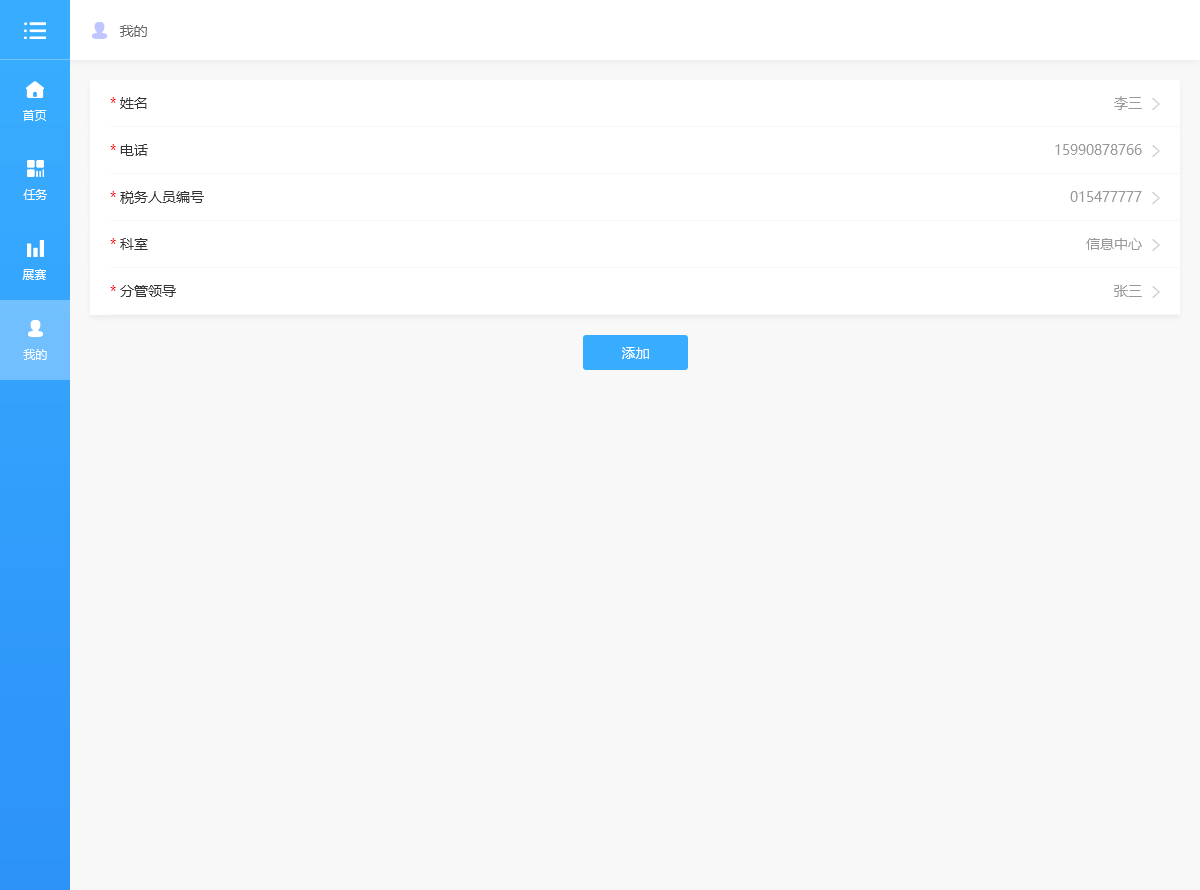
<style>
.page{position:relative;width:1200px;height:890px;background:#f8f8f8}
.page>*{position:absolute;margin:0}
.t1{font:14px "MicrosoftYaHei";color:#666666}
.t2{font:14px "MicrosoftYaHei";color:#333333}
.t3{font:14px "MicrosoftYaHei";color:#ff0000}
.t4{font:14px "MicrosoftYaHei";color:#999999}
.t5{font:12px "MicrosoftYaHei";color:#ffffff}
.t6{font:14px "MicrosoftYaHei";color:#ffffff}
</style>
<div class="page">
<p class="t1" style="left:119px;top:25px;width:28px;height:12px">我的</p>
<p class="t2" style="left:110px;top:97px;width:37px;height:12px"><span class="t3">* </span>姓名</p>
<p class="t4" style="left:1114px;top:96px;width:28px;height:14px">李三</p>
<p class="t5" style="left:23px;top:110px;width:24px;height:11px">首页</p>
<p class="t2" style="left:110px;top:144px;width:38px;height:12px"><span class="t3">* </span>电话</p>
<p class="t4" style="left:1055px;top:144px;width:87px;height:11px">15990878766</p>
<p class="t5" style="left:23px;top:189px;width:24px;height:11px">任务</p>
<p class="t2" style="left:110px;top:191px;width:94px;height:13px"><span class="t3">* </span>税务人员编号</p>
<p class="t4" style="left:1070px;top:191px;width:72px;height:11px">015477777</p>
<p class="t2" style="left:110px;top:238px;width:38px;height:12px"><span class="t3">* </span>科室</p>
<p class="t4" style="left:1086px;top:238px;width:56px;height:12px">信息中心</p>
<p class="t5" style="left:22px;top:269px;width:24px;height:11px">展赛</p>
<p class="t2" style="left:110px;top:285px;width:66px;height:12px"><span class="t3">* </span>分管领导</p>
<p class="t4" style="left:1114px;top:285px;width:28px;height:12px">张三</p>
<p class="t5" style="left:23px;top:349px;width:24px;height:11px">我的</p>
<p class="t6" style="left:622px;top:347px;width:27px;height:12px">添加</p>
</div>
